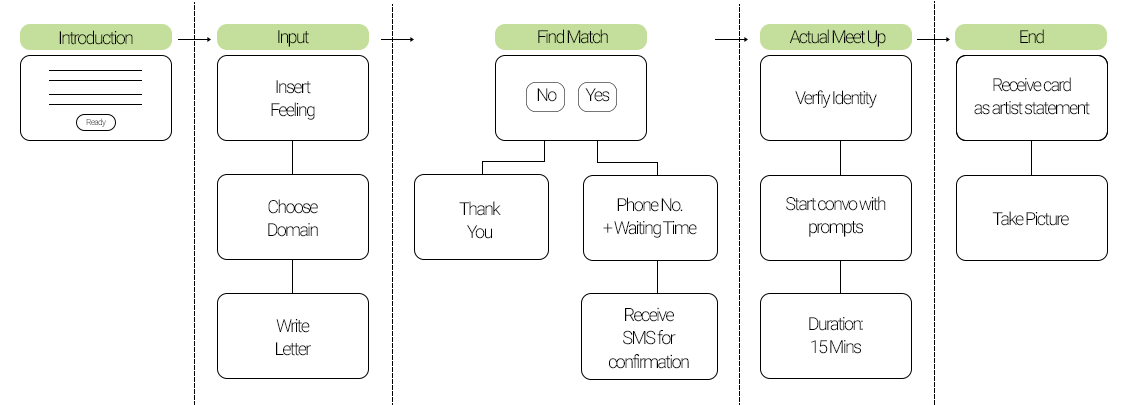
<style>
.page{position:relative;width:1126px;height:405px;background:#ffffff}
.page>*{position:absolute;margin:0}
.t1{font:18px "Roboto-Light";letter-spacing:-0.1em;color:#000000}
.t2{font:18px/23.4px "Roboto-Light";letter-spacing:-0.1em;color:#000000}
.t3{font:8.6px "Roboto-Light";letter-spacing:-0.1em}
.t4{font:18.2px/23.6px "Roboto-Light";letter-spacing:-0.1em;color:#000000}
</style>
<div class="page">
<p class="t1" style="left:59px;top:30px;width:74px;height:15px">Introduction</p>
<p class="t1" style="left:278px;top:30px;width:31px;height:17px">Input</p>
<p class="t1" style="left:538px;top:29px;width:70px;height:15px">Find Match</p>
<p class="t1" style="left:789px;top:29px;width:97px;height:18px">Actual Meet Up</p>
<p class="t1" style="left:1020px;top:29px;width:24px;height:15px">End</p>
<p class="t2" style="left:974px;top:77px;width:116px;height:38px;text-align:center">Receive card <br>as artist statement</p>
<p class="t2" style="left:271px;top:80px;width:44px;height:40px;text-align:center">Insert<br>Feeling</p>
<p class="t1" style="left:537px;top:88px;width:20px;height:14px">No</p>
<p class="t1" style="left:585px;top:88px;width:25px;height:14px">Yes</p>
<p class="t1" style="left:795px;top:90px;width:82px;height:18px">Verfiy Identity</p>
<p class="t3" style="left:86px;top:118px;width:20px;height:9px">Ready</p>
<p class="t2" style="left:603px;top:197px;width:94px;height:41px;text-align:center">Phone No. <br>+ Waiting Time</p>
<p class="t2" style="left:786px;top:196px;width:100px;height:41px;text-align:center">Start convo with <br>prompts</p>
<p class="t2" style="left:268px;top:199px;width:50px;height:38px;text-align:center">Choose<br>Domain</p>
<p class="t2" style="left:459px;top:201px;width:42px;height:38px;text-align:center">Thank<br>You</p>
<p class="t1" style="left:992px;top:211px;width:77px;height:15px">Take Picture</p>
<p class="t4" style="left:609px;top:307px;width:80px;height:62px;text-align:center">Receive <br>SMS for <br>confirmation</p>
<p class="t2" style="left:809px;top:317px;width:54px;height:37px;text-align:center">Duration:<br>15 Mins</p>
<p class="t2" style="left:276px;top:319px;width:35px;height:37px;text-align:center">Write <br>Letter</p>
</div>
